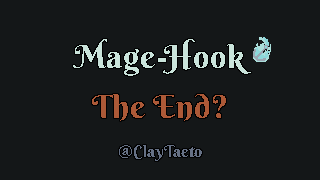
<style>
.page{position:relative;width:320px;height:180px;background:#141718}
.page>*{position:absolute;margin:0}
.t1{font:32px "BerkshireSwash-Regular";letter-spacing:0.025em;color:#cae4db}
.t2{font:32px "BerkshireSwash-Regular";letter-spacing:0.025em;color:#ac5937}
.t3{font:16px "BerkshireSwash-Regular";letter-spacing:0.025em;color:#667185}
</style>
<div class="page">
<p class="t1" style="left:73px;top:39px;width:178px;height:37px">Mage-Hook</p>
<p class="t2" style="left:92px;top:94px;width:134px;height:27px">The End?</p>
<p class="t3" style="left:119px;top:145px;width:83px;height:16px">@ClayTaeto</p>
</div>
